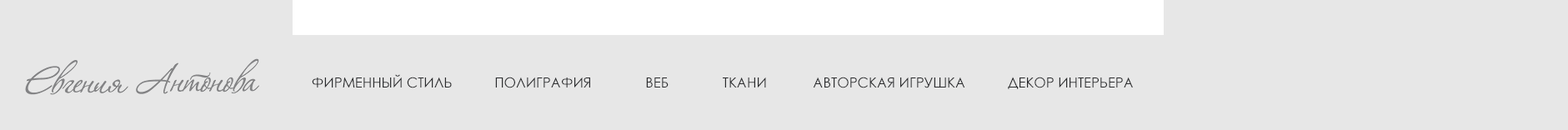
<style>
.page{position:relative;width:1568px;height:130px;background:#e7e7e7}
.page>*{position:absolute;margin:0}
.t1{font:13.9px "CenturyGothic";color:#2a2b2d;text-transform:uppercase}
</style>
<div class="page">
<p class="t1" style="left:312px;top:74px;width:821px;height:15px">фирменный стиль           полиграфия              веб              ткани            Авторская игрушка           Декор интерьера</p>
</div>
